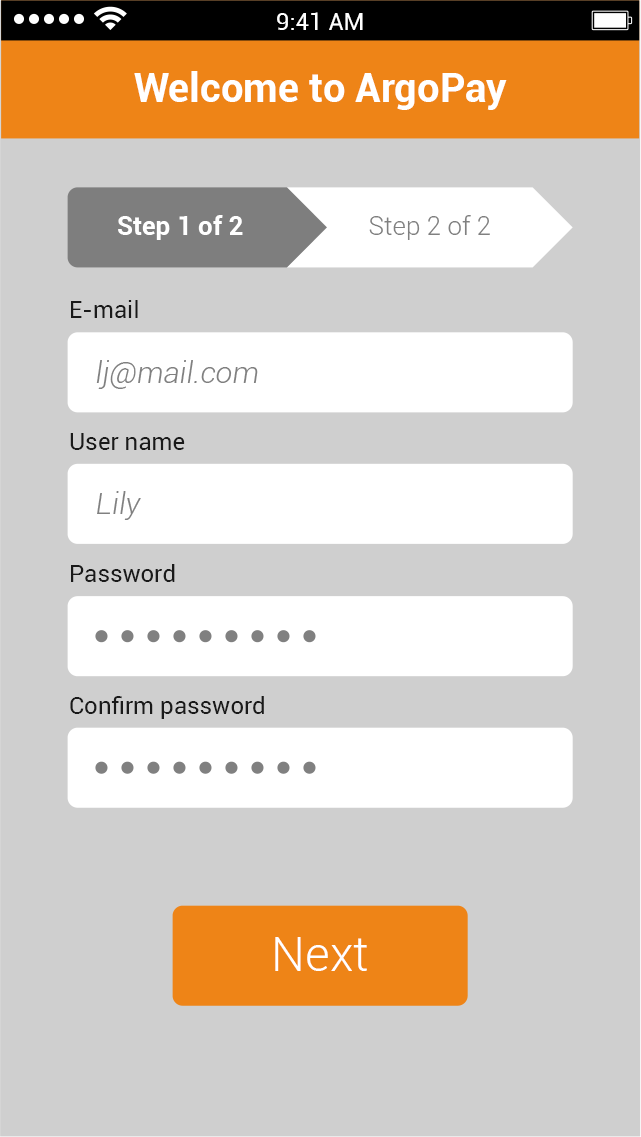
<style>
.page{position:relative;width:641px;height:1137px;background:#cfcfcf}
.page>*{position:absolute;margin:0}
.t1{font:24px "Roboto-Regular";color:#ffffff}
.t2{font:40px "Roboto-Bold";color:#ffffff}
.t3{font:26px "Roboto-Bold";color:#ffffff}
.t4{font:26px "Roboto-Light";color:#808080}
.t5{font:24px "Roboto-Regular";color:#1a1a1a}
.t6{font:30px "Roboto-LightItalic";color:#808080}
.t7{font:48px "Roboto-Light";color:#ffffff}
</style>
<div class="page">
<p class="t1" style="left:277px;top:12px;width:86px;height:18px">9:41 AM</p>
<p class="t2" style="left:134px;top:71px;width:373px;height:39px">Welcome to ArgoPay</p>
<p class="t3" style="left:118px;top:215px;width:125px;height:25px">Step 1 of 2</p>
<p class="t4" style="left:369px;top:215px;width:121px;height:25px">Step 2 of 2</p>
<p class="t5" style="left:71px;top:300px;width:67px;height:18px">E-mail</p>
<p class="t6" style="left:96px;top:360px;width:162px;height:29px">lj@mail.com</p>
<p class="t5" style="left:70px;top:433px;width:115px;height:17px">User name</p>
<p class="t6" style="left:97px;top:491px;width:44px;height:29px">Lily</p>
<p class="t5" style="left:71px;top:564px;width:104px;height:18px">Password</p>
<p class="t5" style="left:70px;top:696px;width:194px;height:23px">Confirm password</p>
<p class="t7" style="left:275px;top:937px;width:92px;height:34px">Next</p>
</div>
